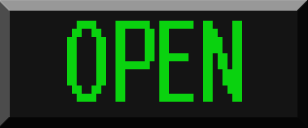
<style>
.page{position:relative;width:308px;height:128px;background:#141414}
.page>*{position:absolute;margin:0}
.t1{font:103.7px "System";color:#0ad20f;scale:0.6 1}
</style>
<div class="page">
<p class="t1" style="left:67px;top:20px;width:175px;height:82px">OPEN</p>
</div>
